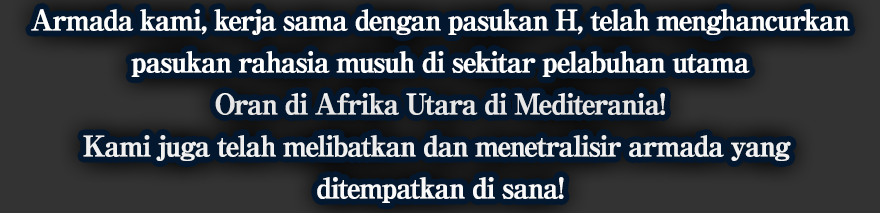
<style>
.page{position:relative;width:880px;height:213px;background:#03172f}
.page>*{position:absolute;margin:0}
.t1{font:28px/42px "RyuminPro-ExBold";letter-spacing:-0.08em;color:#ffffff;font-weight:bold}
</style>
<div class="page">
<p class="t1" style="left:31px;top:9px;width:819px;height:194px;text-align:center">Armada kami, kerja sama dengan pasukan H, telah menghancurkan<br>pasukan rahasia musuh di sekitar pelabuhan utama<br>Oran di Afrika Utara di Mediterania!<br>Kami juga telah melibatkan dan menetralisir armada yang <br>ditempatkan di sana!</p>
</div>
